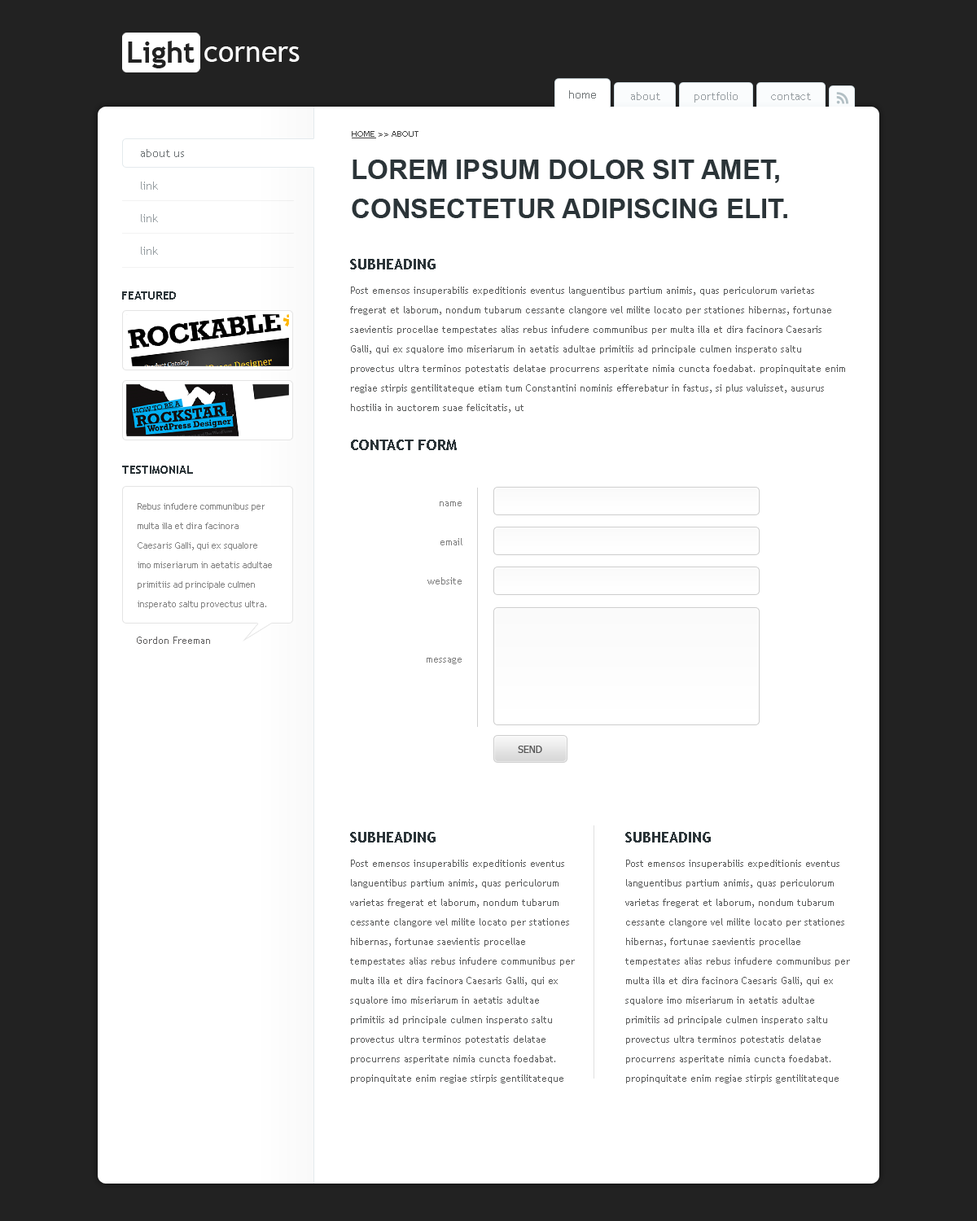
<style>
.page{position:relative;width:977px;height:1221px;background:#ffffff}
.page>*{position:absolute;margin:0}
.t1{font:29.3px "TrebuchetMS-Bold";color:#222222}
.t2{font:29.3px "TrebuchetMS";color:#ffffff}
.t3{font:11.4px "TrebuchetMS";color:#707577}
.t4{font:11.4px "TrebuchetMS";color:#969da1}
.t5{font:8.1px "Tahoma";color:#424242;text-transform:uppercase}
.t6{font:8.1px "Tahoma";color:#424242;text-transform:uppercase;text-decoration:underline}
.t7{font:11.4px/32.6px "TrebuchetMS";color:#969da1}
.t8{font:11.4px/32.6px "TrebuchetMS";color:#707577}
.t9{font:26.9px/39.1px "Arial-BoldMT";color:#2b3438;text-transform:uppercase}
.t10{font:9.8px/19.5px "TrebuchetMS";color:#595a5a}
.t11{font:14.7px/19.5px "TrebuchetMS-Bold";color:#2b3438}
.t12{font:11.4px "TrebuchetMS-Bold";color:#2b3438}
.t13{font:9px/19.5px "TrebuchetMS";color:#848484}
.t14{font:9.8px/39.1px "TrebuchetMS";color:#7e7e7e}
.t15{font:9.8px "TrebuchetMS";color:#626161}
.t16{font:9.8px "Tahoma";color:#545454}
</style>
<div class="page">
<p class="t1" style="left:128px;top:41px;width:67px;height:27px">Light</p>
<p class="t2" style="left:204px;top:46px;width:96px;height:16px">corners</p>
<p class="t3" style="left:569px;top:90px;width:27px;height:8px">home</p>
<p class="t4" style="left:631px;top:92px;width:29px;height:8px">about</p>
<p class="t4" style="left:694px;top:92px;width:43px;height:11px">portfolio</p>
<p class="t4" style="left:771px;top:93px;width:40px;height:7px">contact</p>
<p class="t5" style="left:352px;top:131px;width:66px;height:7px"><span class="t6">Home</span> &gt;&gt; About</p>
<p class="t7" style="left:141px;top:149px;width:43px;height:106px"><span class="t8">about us<br></span>link<br>link<br>link</p>
<p class="t9" style="left:352px;top:160px;width:435px;height:58px">Lorem ipsum dolor sit amet, consectetur adipiscing elit.</p>
<p class="t10" style="left:350px;top:259px;width:495px;height:191px"><span class="t11">SUBHEADING<br><br></span>Post emensos insuperabilis expeditionis eventus languentibus partium animis, quas periculorum varietas fregerat et laborum, nondum tubarum cessante clangore vel milite locato per stationes hibernas, fortunae saevientis procellae tempestates alias rebus infudere communibus per multa illa et dira facinora Caesaris Galli, qui ex squalore imo miseriarum in aetatis adultae primitiis ad principale culmen insperato saltu provectus ultra terminos potestatis delatae procurrens asperitate nimia cuncta foedabat. propinquitate enim regiae stirpis gentilitateque etiam tum Constantini nominis efferebatur in fastus, si plus valuisset, ausurus hostilia in auctorem suae felicitatis, ut<br><br><span class="t11">CONTACT FORM</span></p>
<p class="t12" style="left:122px;top:291px;width:54px;height:9px">FEATURED</p>
<p class="t12" style="left:122px;top:466px;width:71px;height:8px">TESTIMONIAL</p>
<p class="t13" style="left:138px;top:503px;width:134px;height:106px">Rebus infudere communibus per multa illa et dira facinora Caesaris Galli, qui ex squalore imo miseriarum in aetatis adultae primitiis ad principale culmen insperato saltu provectus ultra. terminos.</p>
<p class="t14" style="left:426px;top:501px;width:36px;height:163px;text-align:right">name<br>email<br>website<br><br>message</p>
<p class="t15" style="left:137px;top:636px;width:73px;height:8px">Gordon Freeman</p>
<p class="t16" style="left:518px;top:746px;width:24px;height:7px">SEND</p>
<p class="t10" style="left:350px;top:832px;width:225px;height:251px"><span class="t11">SUBHEADING<br><br></span>Post emensos insuperabilis expeditionis eventus languentibus partium animis, quas periculorum varietas fregerat et laborum, nondum tubarum cessante clangore vel milite locato per stationes hibernas, fortunae saevientis procellae tempestates alias rebus infudere communibus per multa illa et dira facinora Caesaris Galli, qui ex squalore imo miseriarum in aetatis adultae primitiis ad principale culmen insperato saltu provectus ultra terminos potestatis delatae procurrens asperitate nimia cuncta foedabat. propinquitate enim regiae stirpis gentilitateque etiam tum Constantini nominis efferebatur in fastus, si plus valuisset, ausurus hos</p>
<p class="t10" style="left:625px;top:832px;width:225px;height:251px"><span class="t11">SUBHEADING<br><br></span>Post emensos insuperabilis expeditionis eventus languentibus partium animis, quas periculorum varietas fregerat et laborum, nondum tubarum cessante clangore vel milite locato per stationes hibernas, fortunae saevientis procellae tempestates alias rebus infudere communibus per multa illa et dira facinora Caesaris Galli, qui ex squalore imo miseriarum in aetatis adultae primitiis ad principale culmen insperato saltu provectus ultra terminos potestatis delatae procurrens asperitate nimia cuncta foedabat. propinquitate enim regiae stirpis gentilitateque etiam tum Constantini nominis efferebatur in fastus, si plus valuisset, ausurus hos</p>
</div>
